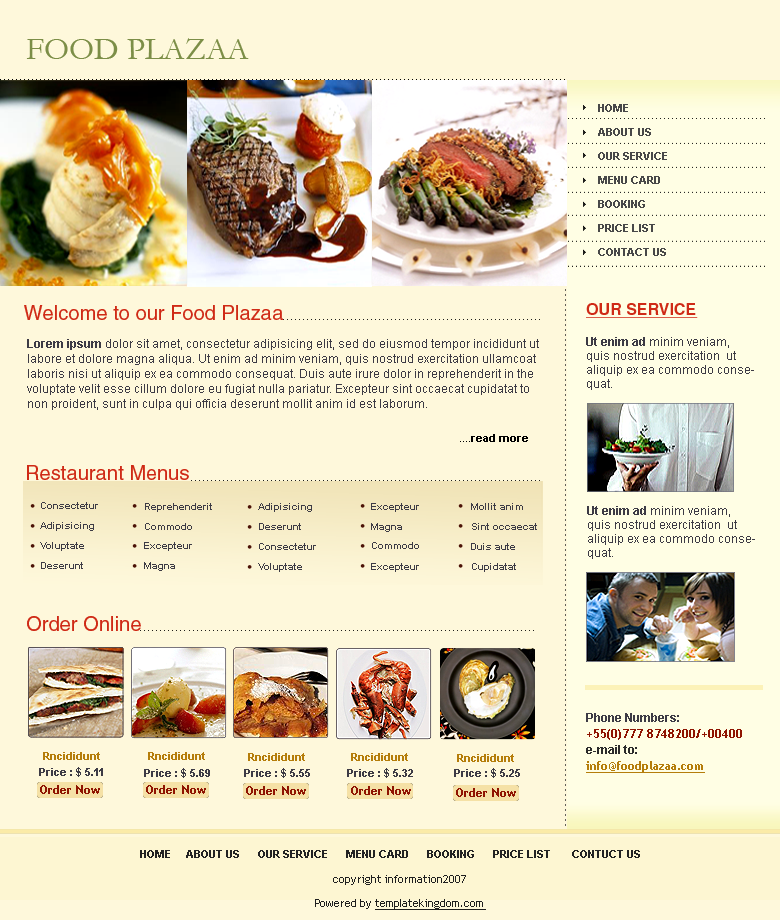
<style>
.page{position:relative;width:780px;height:920px;background:#fef8db}
.page>*{position:absolute;margin:0}
.t1{font:32px "Garamond";color:#7c8e47}
.t2{font:11px/24px "Arial-BoldMT";color:#484848}
.t3{font:20px "Helvetica";letter-spacing:0.005em;color:#cf2a16}
.t4{font:16px "Helvetica-Bold";letter-spacing:0.005em;color:#cf2a16;text-decoration:underline}
.t5{font:12px/15px "ArialMT";color:#3d3b45}
.t6{font:12px/15px "Arial-BoldMT";color:#3d3b45}
.t7{font:12px/14px "ArialMT";color:#3d3b45}
.t8{font:12px/14px "Arial-BoldMT";color:#3d3b45}
.t9{font:11px "Arial-BoldMT";color:#000000}
.t10{font:12px "ArialMT";color:#0bb674}
.t11{font:12px "ArialMT";color:#010101}
.t12{font:12px "ArialMT";color:#000000}
.t13{font:10px "Arial-BoldMT";color:#3d3b45}
.t14{font:12px/16px "TrebuchetMS-Bold";color:#8f1401}
.t15{font:12px/16px "Arial-BoldMT";color:#3d3b45}
.t16{font:12px/16px "Arial-BoldMT";color:#2b2b2b}
.t17{font:12px/16px "TrebuchetMS-Bold";color:#b57d0a;text-decoration:underline}
.t18{font:11px "Arial-BoldMT";color:#b57d0a}
.t19{font:11px "Arial-BoldMT";color:#3d3b45}
.t20{font:12px "TrebuchetMS-Bold";color:#8f1401}
.t21{font:11px "Arial-BoldMT";color:#232323}
.t22{font:11px/24px "TrebuchetMS";color:#1f1f1f}
.t23{font:11px/24px "TrebuchetMS";color:#1f1f1f;text-decoration:underline}
</style>
<div class="page">
<p class="t1" style="left:26px;top:38px;width:223px;height:21px">FOOD PLAZAA</p>
<p class="t2" style="left:598px;top:104px;width:69px;height:152px">HOME <br>ABOUT US <br>OUR SERVICE              <br>MENU CARD<br>BOOKING<br>PRICE LIST     <br>CONTACT US</p>
<p class="t3" style="left:24px;top:305px;width:259px;height:15px">Welcome to our Food Plazaa</p>
<p class="t4" style="left:586px;top:303px;width:112px;height:15px">OUR SERVICE</p>
<p class="t5" style="left:27px;top:339px;width:512px;height:71px"><span class="t6">Lorem ipsum</span> dolor sit amet, consectetur adipisicing elit, sed do eiusmod tempor incididunt ut labore et dolore magna aliqua. Ut enim ad minim veniam, quis nostrud exercitation ullamcoat laboris nisi ut aliquip ex ea commodo consequat. Duis aute irure dolor in reprehenderit in the voluptate velit esse cillum dolore eu fugiat nulla pariatur. Excepteur sint occaecat cupidatat to non proident, sunt in culpa qui officia deserunt mollit anim id est laborum.</p>
<p class="t7" style="left:586px;top:337px;width:168px;height:53px"><span class="t8">Ut enim ad</span> minim veniam, quis nostrud exercitation  ut aliquip ex ea commodo consequat.</p>
<p class="t9" style="left:460px;top:434px;width:68px;height:8px"><span class="t10">    </span><span class="t11">.</span><span class="t12">...</span>read more</p>
<p class="t3" style="left:27px;top:465px;width:162px;height:15px">Restaurant Menus</p>
<p class="t13" style="left:41px;top:502px;width:57px;height:7px">Consectetur</p>
<p class="t13" style="left:145px;top:503px;width:67px;height:9px">Reprehenderit</p>
<p class="t13" style="left:258px;top:503px;width:54px;height:9px">Adipisicing</p>
<p class="t13" style="left:371px;top:503px;width:48px;height:9px">Excepteur</p>
<p class="t13" style="left:471px;top:503px;width:52px;height:7px">Mollit anim</p>
<p class="t7" style="left:587px;top:506px;width:168px;height:53px"><span class="t8">Ut enim ad</span> minim veniam, quis nostrud exercitation  ut aliquip ex ea commodo consequat.</p>
<p class="t13" style="left:40px;top:522px;width:54px;height:9px">Adipisicing</p>
<p class="t13" style="left:145px;top:523px;width:47px;height:7px">Commodo</p>
<p class="t13" style="left:259px;top:523px;width:42px;height:7px">Deserunt</p>
<p class="t13" style="left:371px;top:523px;width:31px;height:9px">Magna</p>
<p class="t13" style="left:472px;top:523px;width:65px;height:7px">Sint occaecat</p>
<p class="t13" style="left:40px;top:542px;width:44px;height:9px">Voluptate</p>
<p class="t13" style="left:144px;top:542px;width:48px;height:9px">Excepteur</p>
<p class="t13" style="left:259px;top:543px;width:57px;height:7px">Consectetur</p>
<p class="t13" style="left:372px;top:542px;width:47px;height:7px">Commodo</p>
<p class="t13" style="left:471px;top:543px;width:44px;height:7px">Duis aute</p>
<p class="t13" style="left:41px;top:562px;width:42px;height:7px">Deserunt</p>
<p class="t13" style="left:144px;top:562px;width:31px;height:9px">Magna</p>
<p class="t13" style="left:258px;top:563px;width:44px;height:9px">Voluptate</p>
<p class="t13" style="left:371px;top:563px;width:48px;height:9px">Excepteur</p>
<p class="t13" style="left:472px;top:563px;width:44px;height:9px">Cupidatat</p>
<p class="t3" style="left:27px;top:616px;width:114px;height:15px">Order Online</p>
<p class="t14" style="left:586px;top:713px;width:156px;height:60px"><span class="t15">Phone Numbers:<br></span>+55(0)777 8748200/+00400<br><span class="t16">e-mail to:<br></span><span class="t17">info@foodplazaa.com</span></p>
<p class="t18" style="left:43px;top:752px;width:57px;height:8px">Rncididunt</p>
<p class="t18" style="left:148px;top:752px;width:57px;height:8px">Rncididunt</p>
<p class="t18" style="left:248px;top:753px;width:57px;height:8px">Rncididunt</p>
<p class="t18" style="left:351px;top:753px;width:57px;height:8px">Rncididunt</p>
<p class="t18" style="left:457px;top:754px;width:57px;height:8px">Rncididunt</p>
<p class="t19" style="left:39px;top:767px;width:64px;height:10px">Price : $ 5.11</p>
<p class="t19" style="left:144px;top:768px;width:66px;height:10px">Price : $ 5.69</p>
<p class="t19" style="left:244px;top:768px;width:66px;height:10px">Price : $ 5.55</p>
<p class="t19" style="left:347px;top:768px;width:66px;height:10px">Price : $ 5.32</p>
<p class="t19" style="left:454px;top:768px;width:66px;height:10px">Price : $ 5.25</p>
<p class="t20" style="left:40px;top:785px;width:60px;height:9px">Order Now</p>
<p class="t20" style="left:146px;top:785px;width:60px;height:9px">Order Now</p>
<p class="t20" style="left:246px;top:786px;width:60px;height:9px">Order Now</p>
<p class="t20" style="left:351px;top:786px;width:60px;height:9px">Order Now</p>
<p class="t20" style="left:456px;top:788px;width:60px;height:9px">Order Now</p>
<p class="t21" style="left:140px;top:850px;width:500px;height:8px">HOME     ABOUT US      OUR SERVICE      MENU CARD      BOOKING      PRICE LIST       CONTUCT US</p>
<p class="t22" style="left:315px;top:875px;width:171px;height:35px;text-align:center">copyright information2007<br>Powered by <span class="t23">templatekingdom.com</span></p>
</div>
